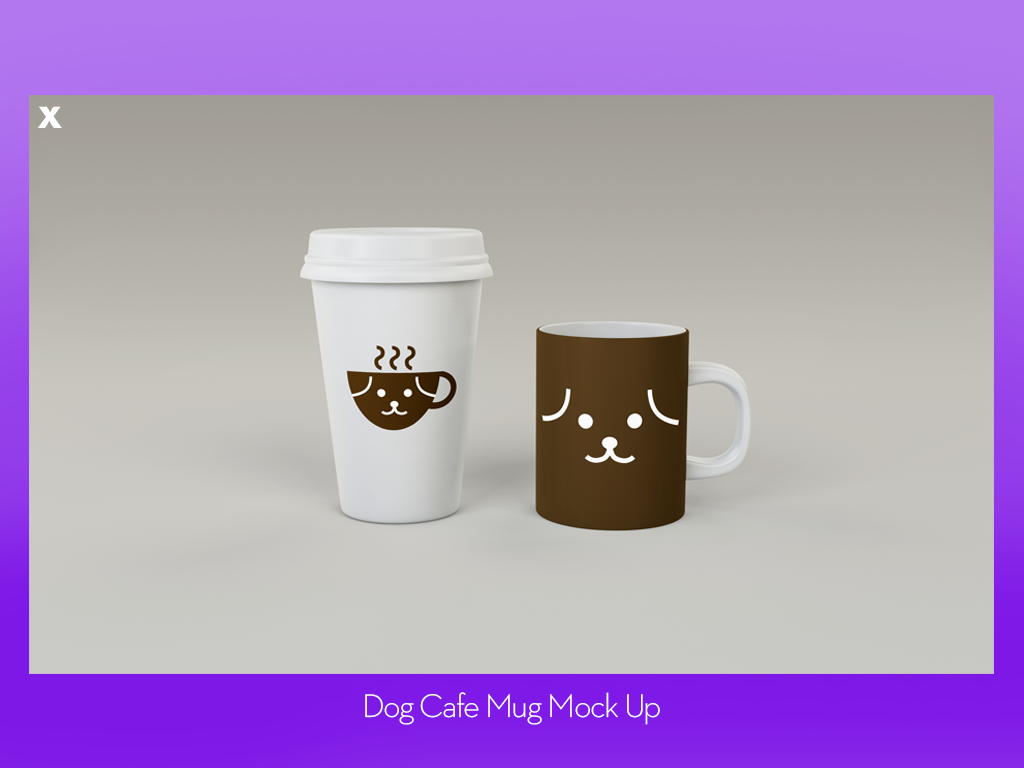
<style>
.page{position:relative;width:1024px;height:768px}
.page>*{position:absolute;margin:0}
.t1{font:50px "NeutraText-Bold";letter-spacing:-0.045em;color:#fefefe}
.t2{font:33.3px "NeutraText-Light";letter-spacing:-0.045em;color:#fefefe}
</style>
<div class="page">
<p class="t1" style="left:37px;top:106px;width:25px;height:22px">x</p>
<p class="t2" style="left:365px;top:692px;width:295px;height:33px">Dog Cafe Mug Mock Up</p>
</div>
